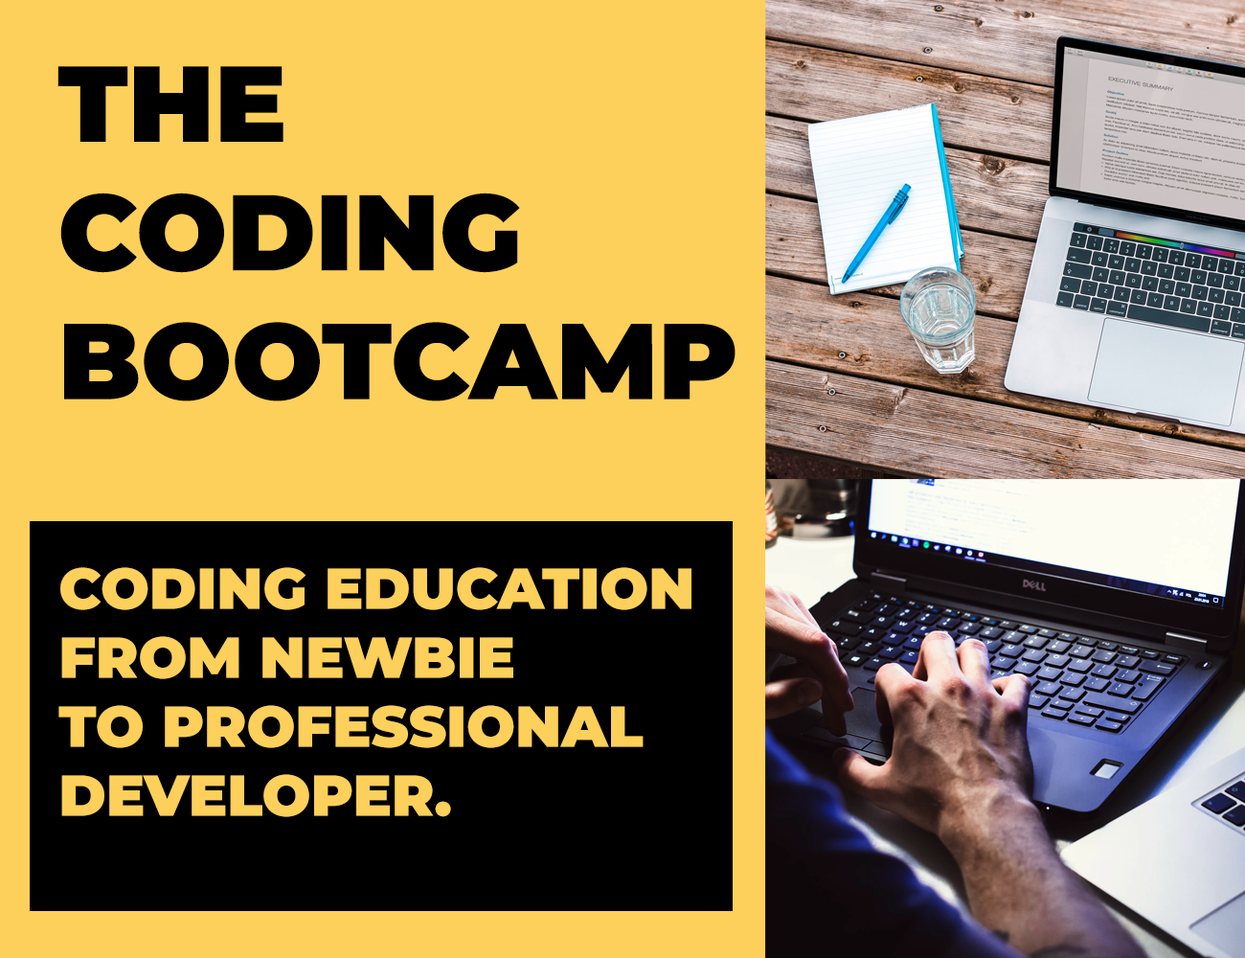
<style>
.page{position:relative;width:1245px;height:958px;background:#fcd05a}
.page>*{position:absolute;margin:0}
.t1{font:107.3px "Montserrat-Black";color:#000000}
.t2{font:57.5px "Montserrat-Black";color:#fcd05a}
</style>
<div class="page">
<p class="t1" style="left:57px;top:66px;width:679px;height:335px">THE <br>CODING <br>BOOTCAMP</p>
<p class="t2" style="left:58px;top:567px;width:633px;height:250px">CODING EDUCATION <br>FROM NEWBIE <br>TO PROFESSIONAL <br>DEVELOPER.</p>
</div>
